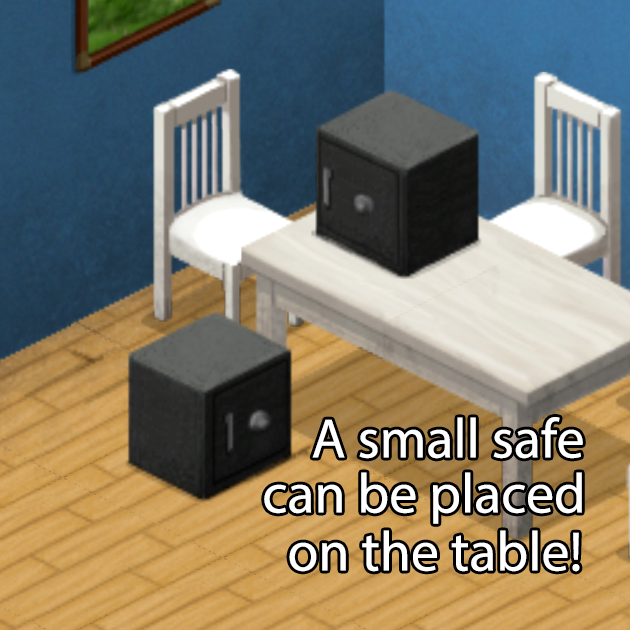
<style>
.page{position:relative;width:630px;height:630px}
.page>*{position:absolute;margin:0}
.t1{font:56px "MyriadPro-Regular";color:#ffffff}
</style>
<div class="page">
<p class="t1" style="left:312px;top:417px;width:271px;height:42px">A small safe</p>
<p class="t1" style="left:264px;top:472px;width:318px;height:52px">can be placed</p>
<p class="t1" style="left:289px;top:530px;width:291px;height:42px">on the table!</p>
</div>
